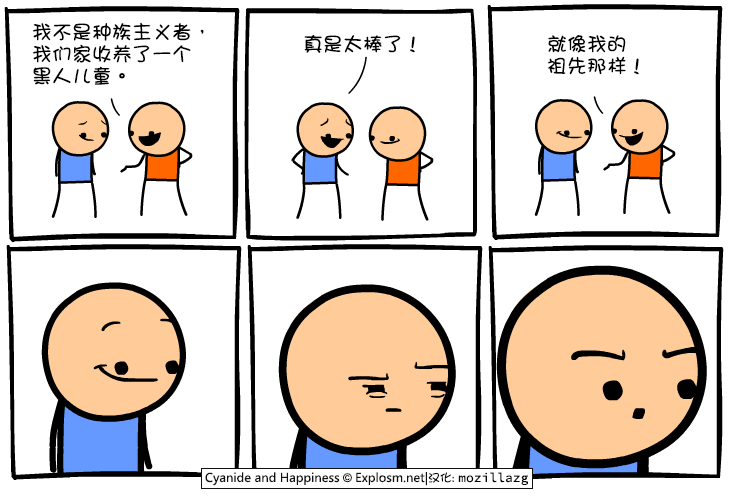
<style>
.page{position:relative;width:730px;height:500px;background:#ffffff}
.page>*{position:absolute;margin:0}
.t1{font:20px/22px "DFGirl";color:#000000}
.t2{font:20px "DFGirl";color:#000000}
</style>
<div class="page">
<p class="t1" style="left:32px;top:22px;width:172px;height:63px">我不是种族主义者，<br>我们家收养了一个<br>黑人儿童。</p>
<p class="t2" style="left:304px;top:34px;width:111px;height:19px">真是太棒了！</p>
<p class="t1" style="left:547px;top:35px;width:92px;height:40px">就像我的<br>祖先那样！</p>
</div>
